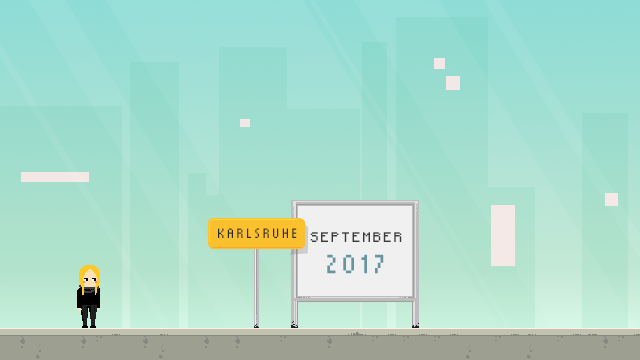
<style>
.page{position:relative;width:640px;height:360px}
.page>*{position:absolute;margin:0}
.t1{font:14px "Munro";letter-spacing:0.2em;color:#2b2b2b}
.t2{font:11px "Minecraftia-Regular";letter-spacing:0.2em;color:#383838}
.t3{font:27px "Munro";letter-spacing:0.2em;color:#6695a2}
</style>
<div class="page">
<p class="t1" style="left:218px;top:228px;width:79px;height:10px">KARLSRUHE</p>
<p class="t2" style="left:310px;top:232px;width:92px;height:10px">SEPTEMBER</p>
<p class="t3" style="left:327px;top:254px;width:57px;height:20px">2017</p>
</div>
